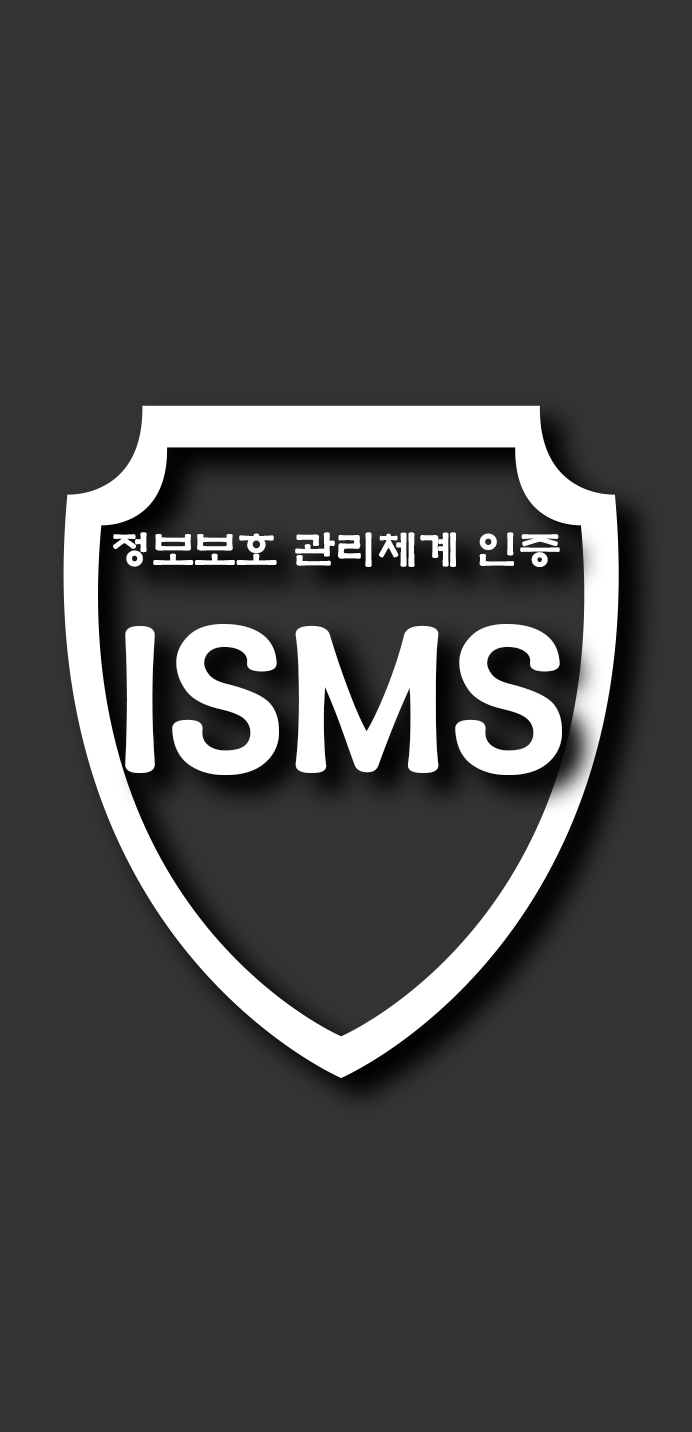
<style>
.page{position:relative;width:692px;height:1432px;background:#333333}
.page>*{position:absolute;margin:0}
.t1{font:41.7px "YetR-HM";color:#ffffff}
.t2{font:208.3px "YetR-HM";color:#ffffff}
</style>
<div class="page">
<p class="t1" style="left:113px;top:532px;width:447px;height:35px">정보보호 관리체계 인증</p>
<p class="t2" style="left:125px;top:624px;width:437px;height:151px">ISMS</p>
</div>
